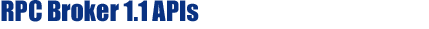
<style>
.page{position:relative;width:429px;height:29px;background:#ffffff}
.page>*{position:absolute;margin:0}
.t1{font:26px "Impact";color:#093282}
</style>
<div class="page">
<p class="t1" style="left:1px;top:0px;width:198px;height:22px">RPC Broker 1.1 APIs</p>
</div>
